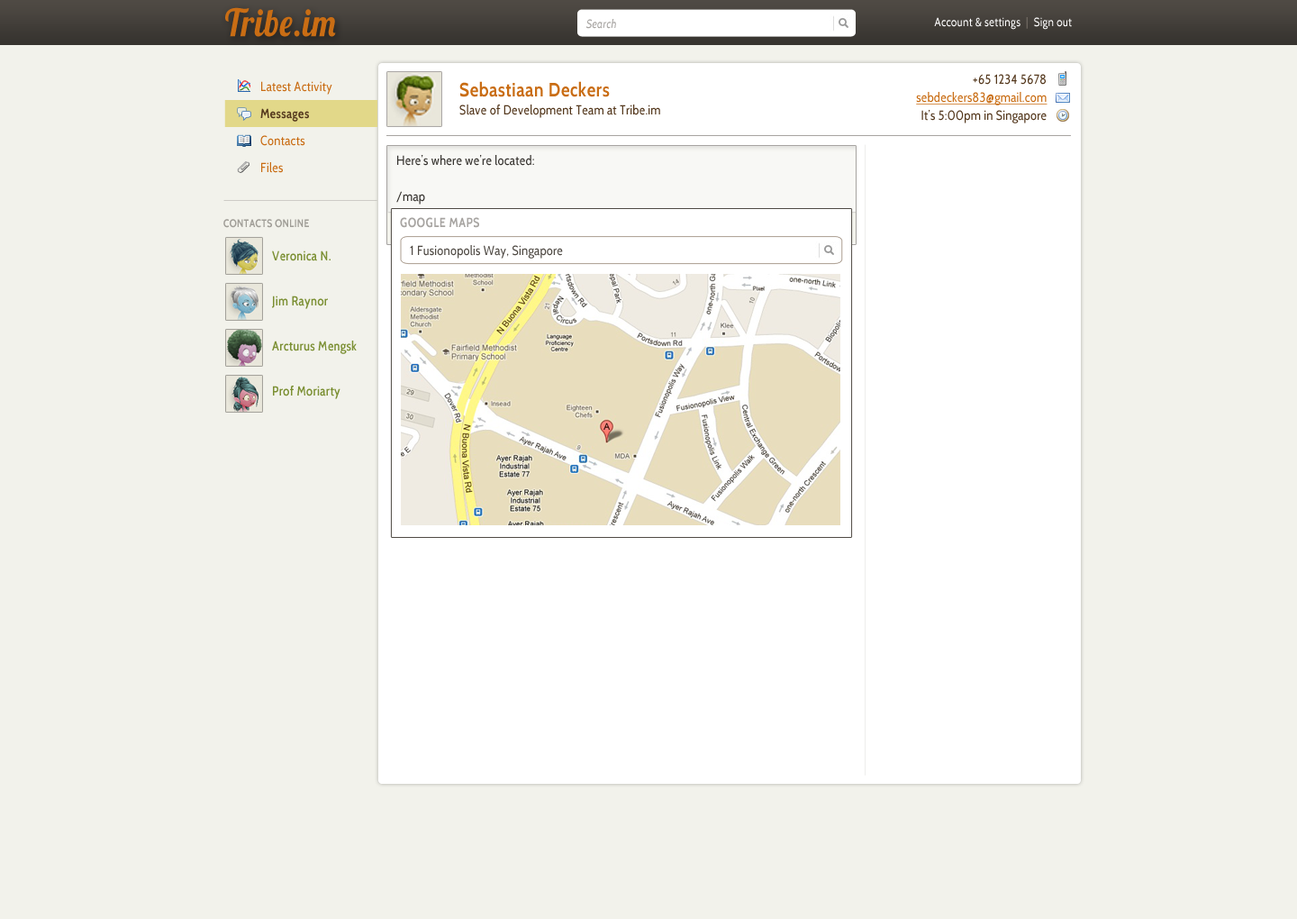
<style>
.page{position:relative;width:1297px;height:919px;background:#f2f2eb}
.page>*{position:absolute;margin:0}
.t1{font:37.8px "Lobster1.4";letter-spacing:0.025em;color:#c96d14;scale:0.88 1}
.t2{font:11.9px "Cabin-Regular";letter-spacing:0.025em;color:#ffffff;scale:0.88 1}
.t3{font:11.9px "Cabin-Regular";letter-spacing:0.025em;color:#7a736b;scale:0.88 1}
.t4{font:11.9px "Cabin-Italic";letter-spacing:0.025em;color:#a7a4a1;scale:0.88 1}
.t5{font:13px/18px "Cabin-Regular";letter-spacing:0.025em;color:#54381d;scale:0.88 1}
.t6{font:13px/18px "Cabin-Regular";letter-spacing:0.025em;color:#c96d14;text-decoration:underline;scale:0.88 1}
.t7{font:13px/27px "Cabin-Regular";letter-spacing:0.025em;color:#c96d14;scale:0.88 1}
.t8{font:13px/27px "Cabin-Bold";letter-spacing:0.025em;color:#54381d;scale:0.88 1}
.t9{font:19.5px/18px "Cabin-Bold";letter-spacing:0.025em;color:#c96d14;scale:0.88 1}
.t10{font:13px/18px "Cabin-Regular";letter-spacing:0.025em;color:#36332f;scale:0.88 1}
.t11{font:10.8px "Cabin-Bold";letter-spacing:0.025em;color:#a09e97;text-transform:uppercase;scale:0.88 1}
.t12{font:13px "Cabin-Bold";letter-spacing:0.025em;color:#a7a4a1;text-transform:uppercase;scale:0.88 1}
.t13{font:13px "Cabin-Regular";letter-spacing:0.025em;color:#4f4a44;scale:0.88 1}
.t14{font:13px/45.1px "Cabin-SemiBold";letter-spacing:0.025em;color:#7c9034;scale:0.88 1}
</style>
<div class="page">
<p class="t1" style="left:225px;top:7px;width:111px;height:30px">Tribe.im</p>
<p class="t2" style="left:934px;top:17px;width:138px;height:13px">Account &amp; settings  <span class="t3">|</span>  Sign out</p>
<p class="t4" style="left:587px;top:19px;width:29px;height:10px">Search</p>
<p class="t5" style="left:916px;top:74px;width:132px;height:49px;text-align:right">+65 1234 5678<br><span class="t6">sebdeckers83@gmail.com<br></span>It’s 5:00pm in Singapore</p>
<p class="t7" style="left:260px;top:81px;width:72px;height:92px">Latest Activity<br><span class="t8">Messages<br></span>Contacts<br>Files</p>
<p class="t5" style="left:460px;top:81px;width:200px;height:37px"><span class="t9">Sebastiaan Deckers<br></span>Slave of Development Team at Tribe.im</p>
<p class="t10" style="left:396px;top:155px;width:138px;height:50px">Here’s where we’re located:<br><br>/map</p>
<p class="t11" style="left:223px;top:219px;width:86px;height:9px">Contacts Online</p>
<p class="t12" style="left:400px;top:217px;width:79px;height:11px">Google Maps</p>
<p class="t13" style="left:410px;top:245px;width:153px;height:14px">1 Fusionopolis Way, Singapore</p>
<p class="t14" style="left:272px;top:250px;width:85px;height:149px">Veronica N.<br>Jim Raynor<br>Arcturus Mengsk<br>Prof Moriarty</p>
</div>
